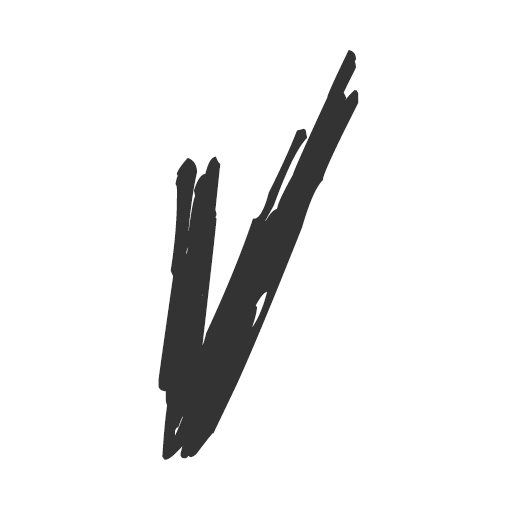
<style>
.page{position:relative;width:512px;height:512px;background:#ffffff}
.page>*{position:absolute;margin:0}
.t1{font:519.9px "AnotherAmerica";color:#333333;font-weight:bold;scale:0.87 1}
</style>
<div class="page">
<p class="t1" style="left:158px;top:50px;width:201px;height:410px">V</p>
</div>
